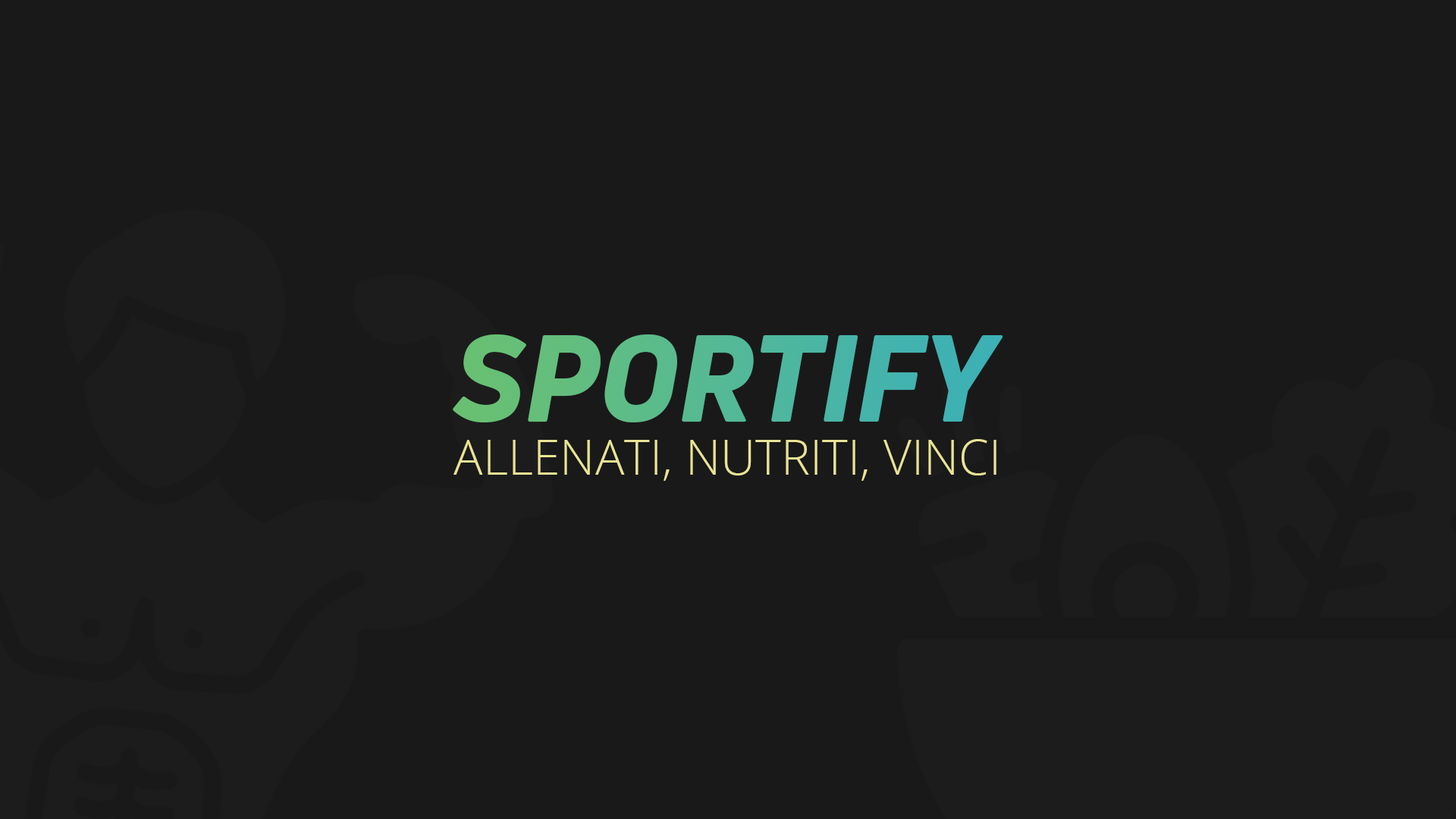
<style>
.page{position:relative;width:1456px;height:819px;background:#191919}
.page>*{position:absolute;margin:0}
.t1{font:121.2px "UniNeue-Trial-HeavyItalic"}
.t2{font:48.8px "OpenSans-Light";color:#e9e495}
</style>
<div class="page">
<p class="t1" style="left:453px;top:334px;width:550px;height:88px">SPORTIFY</p>
<p class="t2" style="left:453px;top:439px;width:543px;height:42px">ALLENATI, NUTRITI, VINCI</p>
</div>
